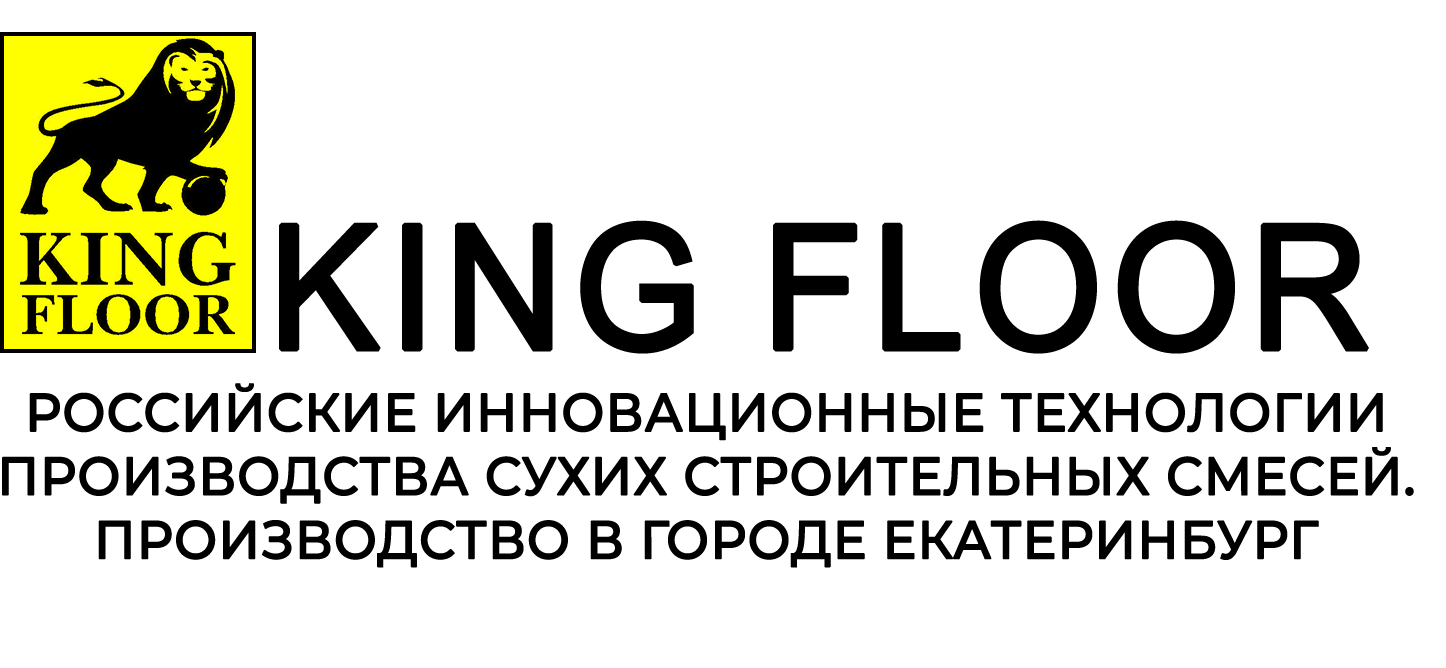
<style>
.page{position:relative;width:1446px;height:668px;background:#ffffff}
.page>*{position:absolute;margin:0}
.t1{font:173px "ArialMT";color:#000000;text-transform:uppercase;font-weight:bold;scale:0.95 1}
.t2{font:53.1px "Montserrat-Medium";color:#000000;text-transform:uppercase;font-weight:bold;scale:0.95 1}
</style>
<div class="page">
<p class="t1" style="left:279px;top:220px;width:1090px;height:134px">KING floor</p>
<p class="t2" style="left:2px;top:383px;width:1412px;height:185px;text-align:center">российские инновационные технологии<br>производства сухих строительных смесей.<br>производство в городе Екатеринбург</p>
</div>
